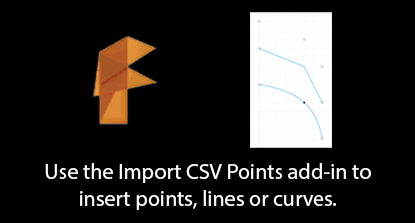
<style>
.page{position:relative;width:415px;height:223px;background:#000000}
.page>*{position:absolute;margin:0}
.t1{font:22px "MyriadPro-Regular";color:#ffffff}
</style>
<div class="page">
<p class="t1" style="left:45px;top:163px;width:326px;height:47px;text-align:center">Use the Import CSV Points add-in to<br>insert points, lines or curves.</p>
</div>
